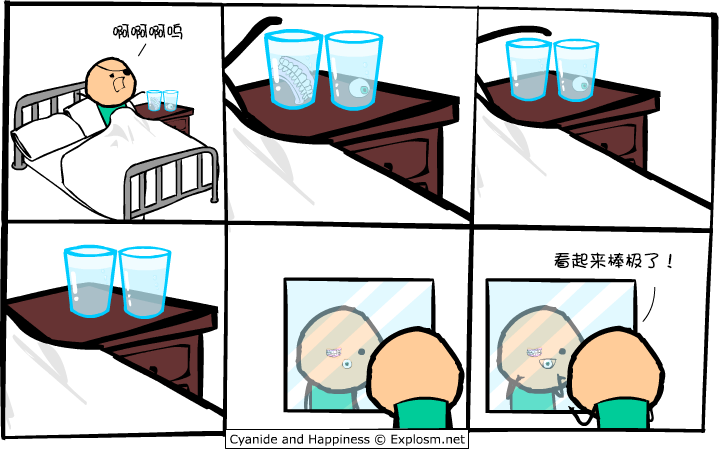
<style>
.page{position:relative;width:720px;height:450px;background:#ffffff}
.page>*{position:absolute;margin:0}
.t1{font:18px "DFGirl";color:#000000}
</style>
<div class="page">
<p class="t1" style="left:113px;top:23px;width:70px;height:17px">啊啊啊呜</p>
<p class="t1" style="left:554px;top:252px;width:118px;height:17px">看起来棒极了！</p>
</div>
